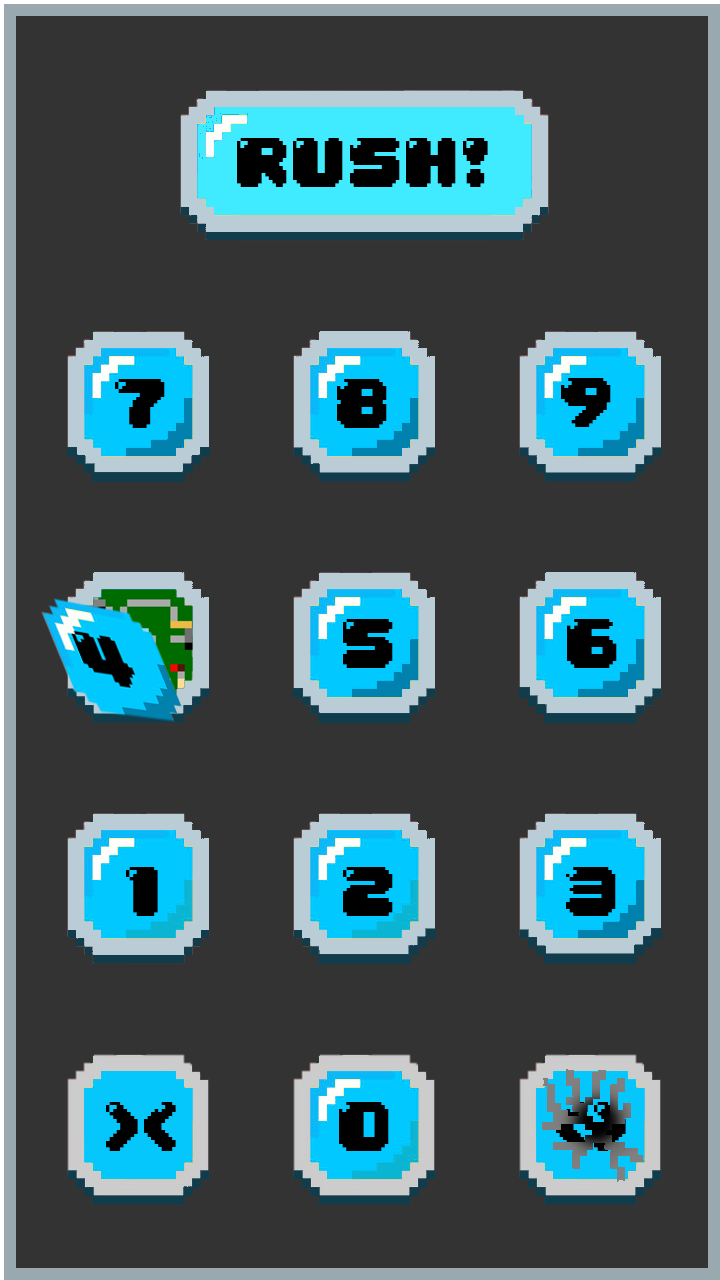
<style>
.page{position:relative;width:720px;height:1280px;background:#333333}
.page>*{position:absolute;margin:0}
.t1{font:60px "04b30";color:#000000}
.t2{font:60px "04b30"}
</style>
<div class="page">
<p class="t1" style="left:237px;top:138px;width:251px;height:49px">RUSH!</p>
<p class="t1" style="left:115px;top:379px;width:50px;height:49px">7</p>
<p class="t1" style="left:337px;top:379px;width:50px;height:49px">8</p>
<p class="t1" style="left:561px;top:378px;width:50px;height:49px">9</p>
<p class="t1" style="left:343px;top:619px;width:50px;height:49px">5</p>
<p class="t1" style="left:567px;top:619px;width:50px;height:49px">6</p>
<p class="t1" style="left:126px;top:867px;width:32px;height:49px">1</p>
<p class="t1" style="left:343px;top:867px;width:50px;height:49px">2</p>
<p class="t1" style="left:566px;top:867px;width:50px;height:49px">3</p>
<p class="t1" style="left:106px;top:1102px;width:70px;height:49px">&gt;&lt;</p>
<p class="t1" style="left:339px;top:1102px;width:50px;height:49px">0</p>
<p class="t2" style="left:556px;top:1102px;width:70px;height:49px">&lt;&gt;</p>
</div>
